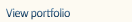
<style>
.page{position:relative;width:132px;height:22px;background:#fdfaf2}
.page>*{position:absolute;margin:0}
.t1{font:13px "Calibri";letter-spacing:-0.04em;color:#1b4569;scale:0.94 1}
</style>
<div class="page">
<p class="t1" style="left:6px;top:8px;width:64px;height:12px">View portfolio</p>
</div>
